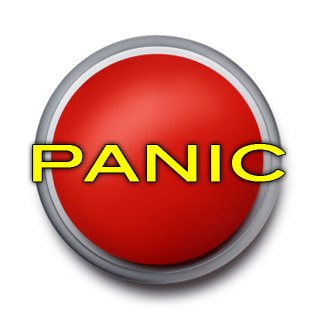
<style>
.page{position:relative;width:320px;height:330px;background:#ffffff}
.page>*{position:absolute;margin:0}
.t1{font:48px "BlairMdITCTTMedium";color:#fffc00;font-weight:bold;scale:1.22 1}
</style>
<div class="page">
<p class="t1" style="left:33px;top:144px;width:252px;height:38px">PANIC</p>
</div>
